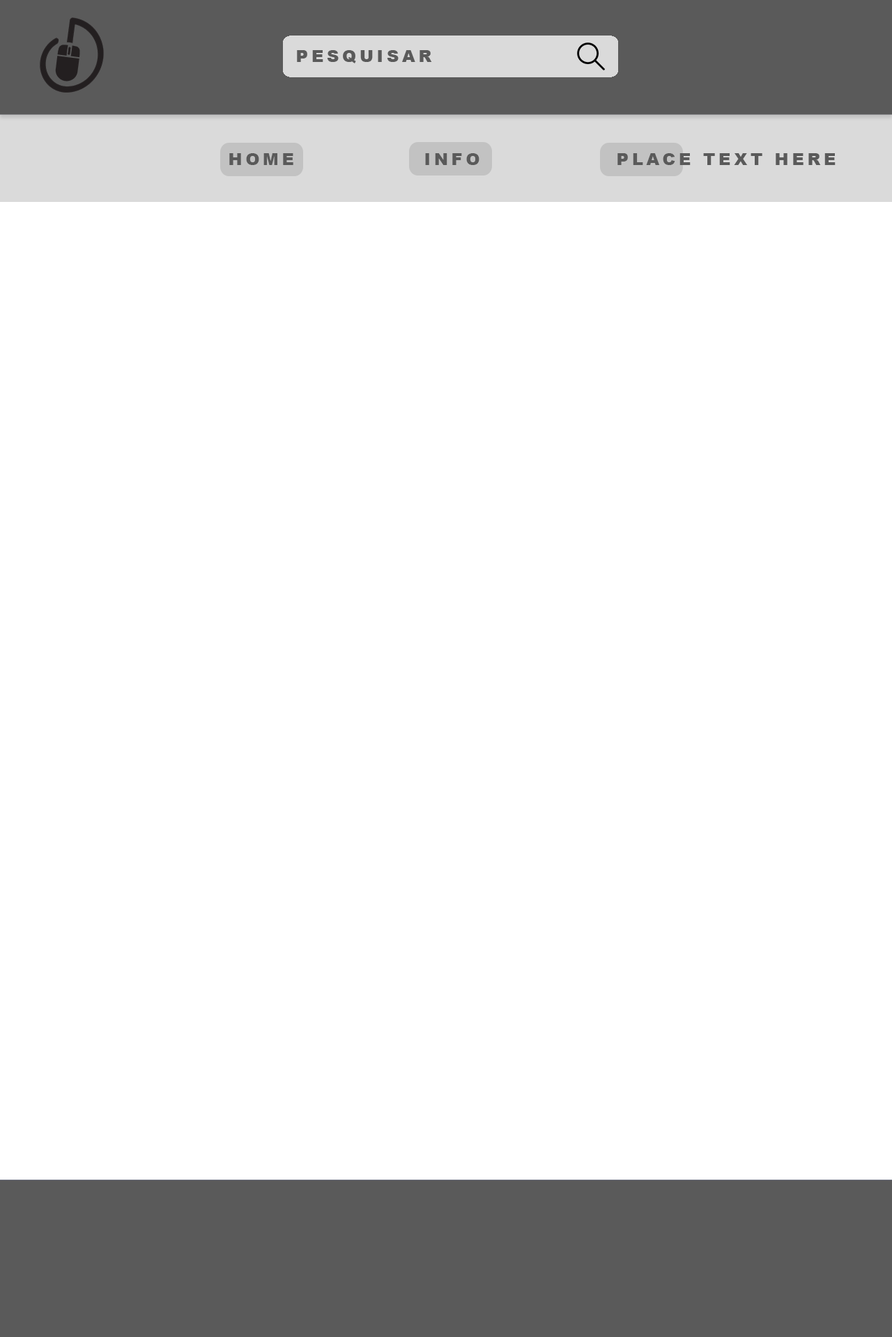
<style>
.page{position:relative;width:892px;height:1337px;background:#ffffff}
.page>*{position:absolute;margin:0}
.t1{font:16.7px "Arial-Black";letter-spacing:0.2em;color:#5a5a5a;text-transform:uppercase}
</style>
<div class="page">
<p class="t1" style="left:229px;top:153px;width:64px;height:12px">Home</p>
<p class="t1" style="left:425px;top:153px;width:54px;height:12px">INFO</p>
<p class="t1" style="left:617px;top:153px;width:218px;height:12px">PLACE TEXT HERE</p>
</div>
